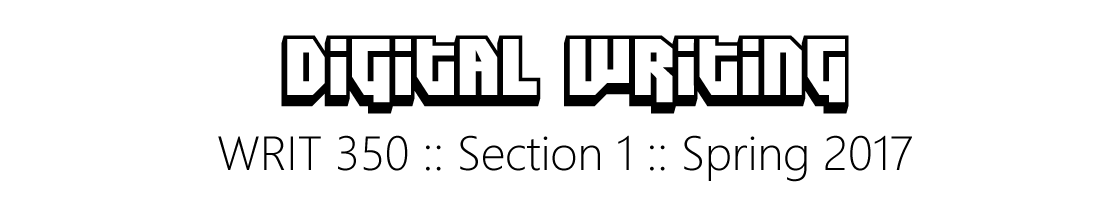
<style>
.page{position:relative;width:1103px;height:210px;background:#ffffff}
.page>*{position:absolute;margin:0}
.t1{font:80px "DimitriSwank";color:#000000}
.t2{font:48px "SegoeUI-Light";color:#000000}
</style>
<div class="page">
<p class="t1" style="left:281px;top:35px;width:568px;height:79px">Digital Writing</p>
<p class="t2" style="left:218px;top:135px;width:694px;height:47px">WRIT 350 :: Section 1 :: Spring 2017</p>
</div>
